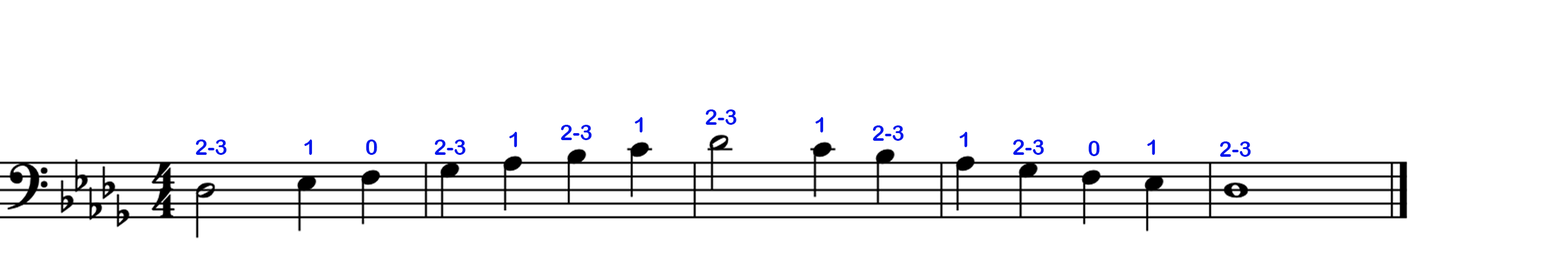
<style>
.page{position:relative;width:1568px;height:279px;background:#ffffff}
.page>*{position:absolute;margin:0}
.t1{font:21.8px "ArialRoundedMTBold";color:#0417ec}
</style>
<div class="page">
<p class="t1" style="left:705px;top:110px;width:32px;height:15px">2-3</p>
<p class="t1" style="left:560px;top:125px;width:32px;height:15px">2-3</p>
<p class="t1" style="left:635px;top:117px;width:8px;height:16px">1</p>
<p class="t1" style="left:815px;top:117px;width:9px;height:16px">1</p>
<p class="t1" style="left:872px;top:126px;width:32px;height:15px">2-3</p>
<p class="t1" style="left:509px;top:132px;width:9px;height:15px">1</p>
<p class="t1" style="left:960px;top:132px;width:8px;height:15px">1</p>
<p class="t1" style="left:195px;top:140px;width:32px;height:15px">2-3</p>
<p class="t1" style="left:304px;top:140px;width:9px;height:15px">1</p>
<p class="t1" style="left:366px;top:140px;width:11px;height:15px">0</p>
<p class="t1" style="left:434px;top:140px;width:32px;height:15px">2-3</p>
<p class="t1" style="left:1013px;top:140px;width:31px;height:15px">2-3</p>
<p class="t1" style="left:1088px;top:141px;width:12px;height:15px">0</p>
<p class="t1" style="left:1147px;top:140px;width:9px;height:15px">1</p>
<p class="t1" style="left:1220px;top:142px;width:31px;height:15px">2-3</p>
</div>
